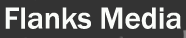
<style>
.page{position:relative;width:186px;height:38px;background:#333333}
.page>*{position:absolute;margin:0}
.t1{font:31.2px "FranklinGothic-Medium";color:#fafcf9}
</style>
<div class="page">
<p class="t1" style="left:5px;top:7px;width:176px;height:22px">Flanks Media</p>
</div>
